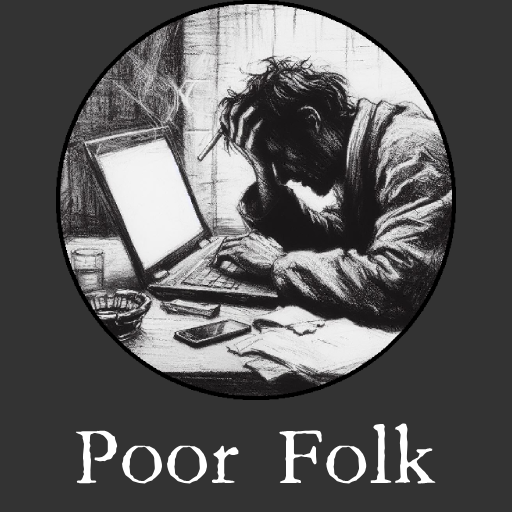
<style>
.page{position:relative;width:512px;height:512px;background:#333333}
.page>*{position:absolute;margin:0}
.t1{font:75px "Aquifer";color:#ffffff}
</style>
<div class="page">
<p class="t1" style="left:75px;top:423px;width:361px;height:62px">Poor Folk</p>
</div>
